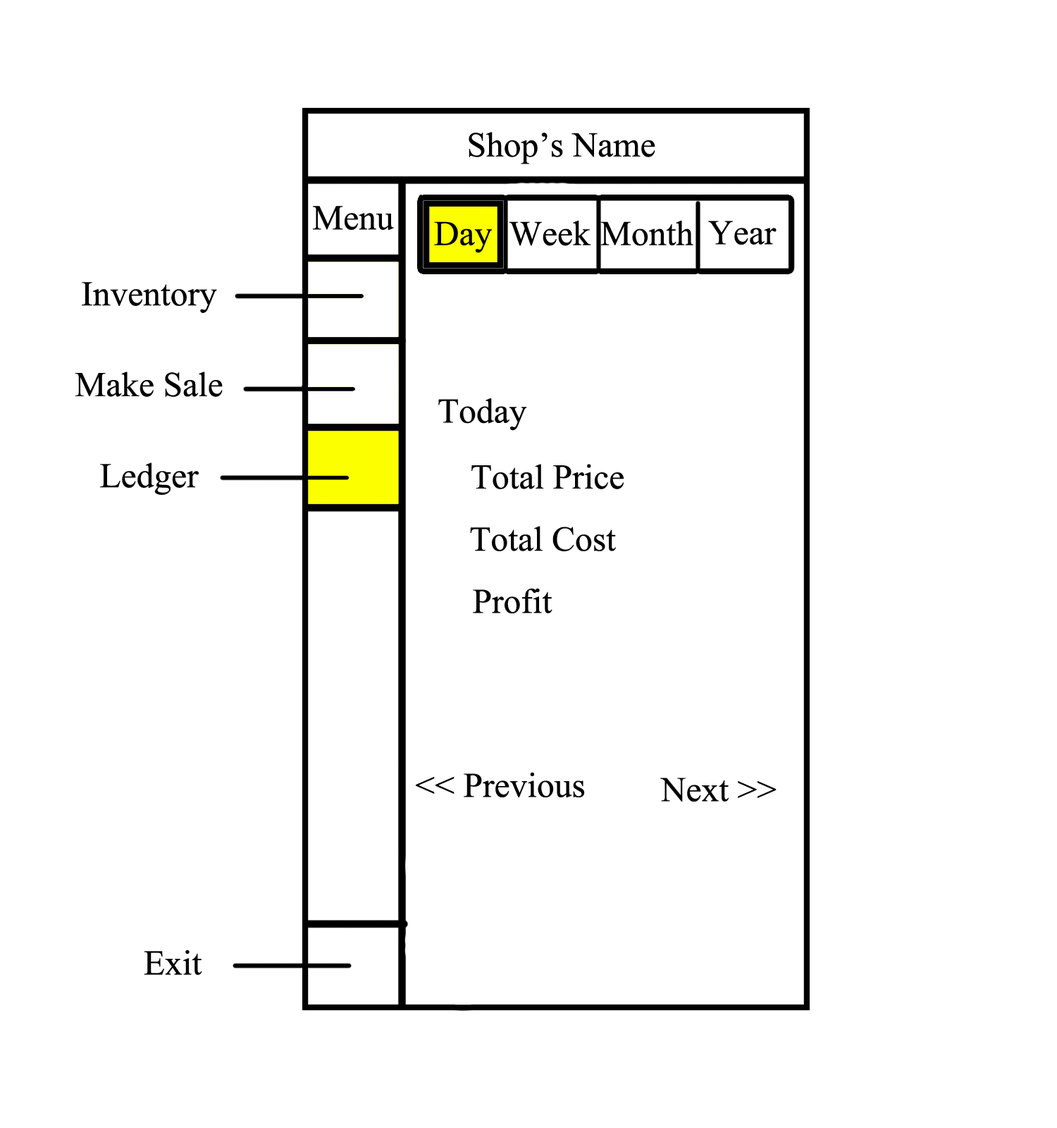
<style>
.page{position:relative;width:1057px;height:1128px;background:#ffffff}
.page>*{position:absolute;margin:0}
.t1{font:52.9px "AngsanaNew";color:#000000}
</style>
<div class="page">
<p class="t1" style="left:469px;top:132px;width:187px;height:32px">Shop’s Name</p>
<p class="t1" style="left:313px;top:206px;width:81px;height:24px">Menu</p>
<p class="t1" style="left:434px;top:221px;width:58px;height:32px">Day</p>
<p class="t1" style="left:509px;top:221px;width:82px;height:25px">Week</p>
<p class="t1" style="left:601px;top:221px;width:93px;height:25px">Month</p>
<p class="t1" style="left:708px;top:221px;width:69px;height:24px">Year</p>
<p class="t1" style="left:82px;top:282px;width:135px;height:31px">Inventory</p>
<p class="t1" style="left:75px;top:371px;width:148px;height:26px">Make Sale</p>
<p class="t1" style="left:438px;top:398px;width:89px;height:33px">Today</p>
<p class="t1" style="left:100px;top:462px;width:99px;height:33px">Ledger</p>
<p class="t1" style="left:472px;top:464px;width:152px;height:25px">Total Price</p>
<p class="t1" style="left:470px;top:526px;width:146px;height:25px">Total Cost</p>
<p class="t1" style="left:473px;top:588px;width:80px;height:25px">Profit</p>
<p class="t1" style="left:416px;top:772px;width:169px;height:25px">&lt;&lt; Previous</p>
<p class="t1" style="left:660px;top:777px;width:117px;height:24px">Next &gt;&gt;</p>
<p class="t1" style="left:144px;top:949px;width:58px;height:26px">Exit</p>
</div>
